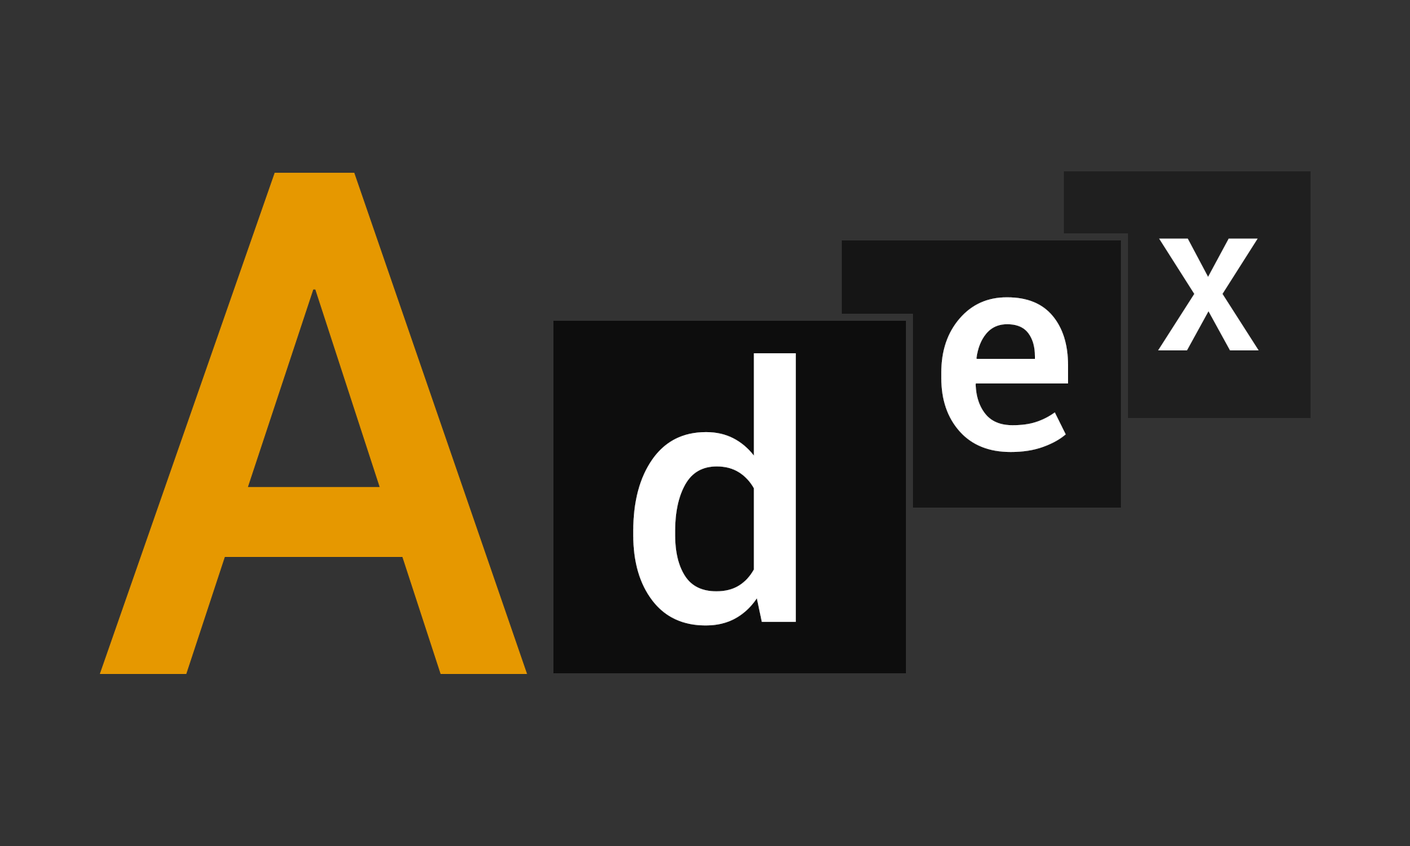
<style>
.page{position:relative;width:1410px;height:846px;background:#333333}
.page>*{position:absolute;margin:0}
.t1{font:704.9px "Roboto-Medium";color:#e69800}
.t2{font:211.5px "Roboto-Medium";color:#ffffff}
.t3{font:281.9px "Roboto-Medium";color:#ffffff}
.t4{font:352.4px "Roboto-Medium";color:#ffffff}
</style>
<div class="page">
<p class="t1" style="left:99px;top:173px;width:428px;height:501px">A</p>
<p class="t2" style="left:1157px;top:238px;width:102px;height:112px">x</p>
<p class="t3" style="left:941px;top:297px;width:127px;height:156px">e</p>
<p class="t4" style="left:633px;top:353px;width:163px;height:273px">d</p>
</div>
